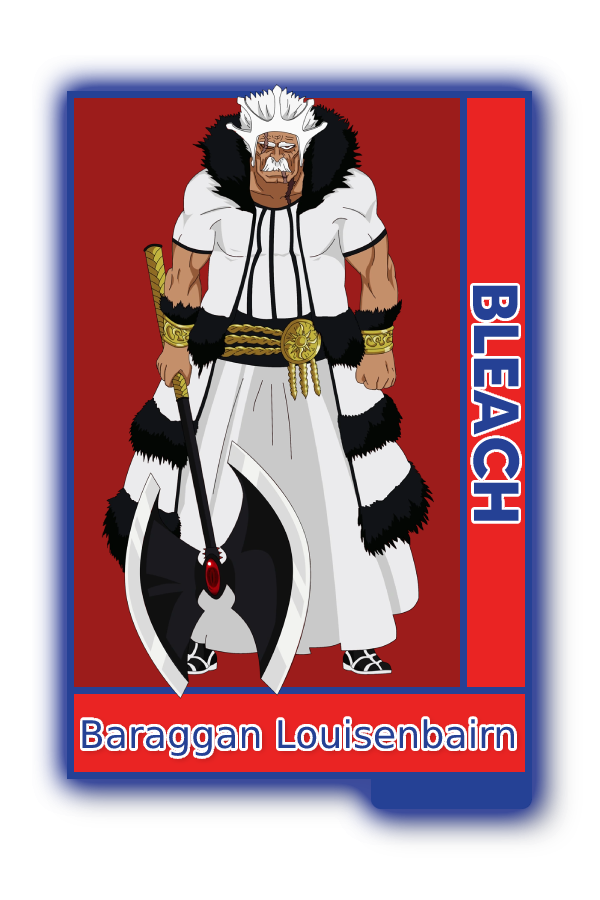
<style>
.page{position:relative;width:600px;height:900px;background:#ffffff}
.page>*{position:absolute;margin:0}
.t1{font:63.6px "MADETOMMY-Bold";color:#254195}
.t2{font:38px "CoolveticaRg-Regular";color:#254195}
</style>
<div class="page">
<p class="t1" style="left:473px;top:285px;width:47px;height:236px;rotate:90deg">BLEACH</p>
<p class="t2" style="left:82px;top:719px;width:433px;height:37px">Baraggan Louisenbairn</p>
</div>
